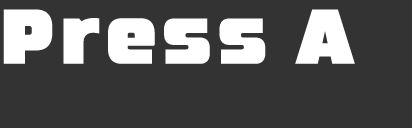
<style>
.page{position:relative;width:412px;height:128px;background:#333333}
.page>*{position:absolute;margin:0}
.t1{font:77.3px "NEOMETRA";letter-spacing:0.07em;color:#ffffff;scale:0.93 1}
</style>
<div class="page">
<p class="t1" style="left:3px;top:9px;width:352px;height:55px">Press A</p>
</div>
